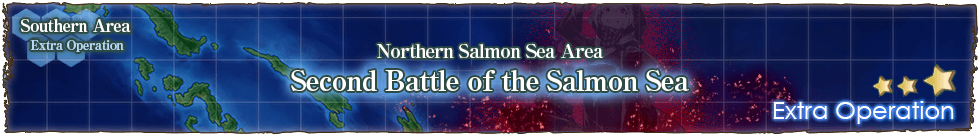
<style>
.page{position:relative;width:980px;height:136px}
.page>*{position:absolute;margin:0}
.t1{font:13px/22px "RyuminPro-ExBold";letter-spacing:-0.04em;color:#b9d7f5}
.t2{font:17px/22px "RyuminPro-ExBold";letter-spacing:-0.04em;color:#ffffff}
.t3{font:19px "RyuminPro-ExBold";letter-spacing:-0.04em;color:#ffffff}
.t4{font:28px "RyuminPro-ExBold";letter-spacing:-0.04em;color:#ffffff}
</style>
<div class="page">
<p class="t1" style="left:20px;top:19px;width:111px;height:33px"><span class="t2">Southern Area<br>　  </span>Extra Operation</p>
<p class="t3" style="left:377px;top:43px;width:227px;height:15px">Northern Salmon Sea Area</p>
<p class="t4" style="left:291px;top:70px;width:398px;height:21px">Second Battle of the Salmon Sea</p>
</div>
